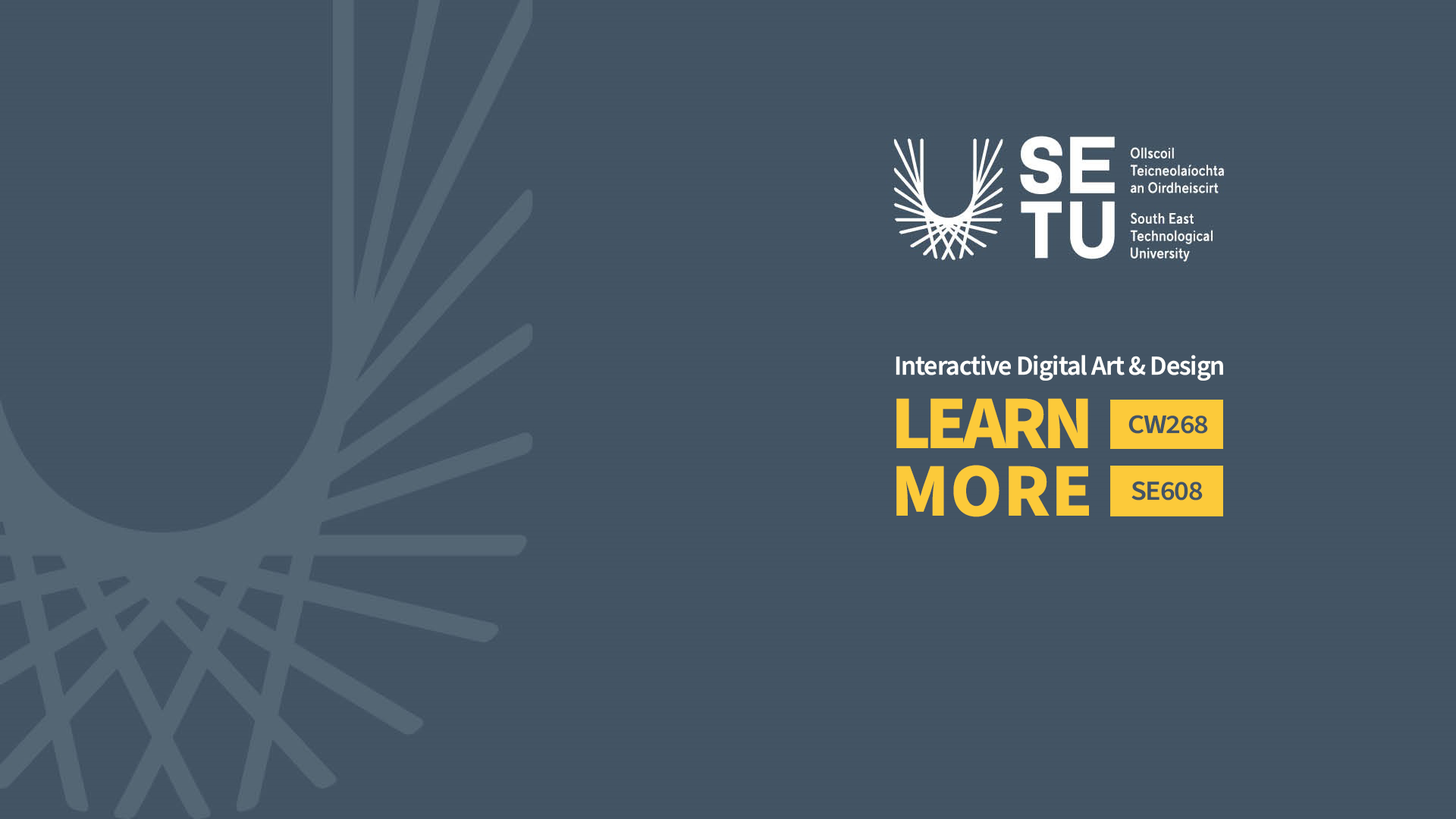
<style>
.page{position:relative;width:1456px;height:819px;background:#435464}
.page>*{position:absolute;margin:0}
.t1{font:27.3px "SourceSans3Roman-Semibold";letter-spacing:-0.03em;color:#fffffd}
.t2{font:75.9px "SourceSans3Roman_800.000wght";letter-spacing:-0.07em;color:#fcca3a}
.t3{font:26.7px "SourceSans3Roman-Semibold";letter-spacing:-0.03em;color:#435465;scale:1.09 1}
.t4{font:75.9px "SourceSans3Roman_800.000wght";letter-spacing:0.01em;color:#fcca3a}
.t5{font:27.5px "SourceSans3Roman-Semibold";letter-spacing:-0.03em;color:#435465;scale:1.06 1}
</style>
<div class="page">
<p class="t1" style="left:896px;top:355px;width:327px;height:26px">Interactive Digital Art &amp; Design</p>
<p class="t2" style="left:896px;top:398px;width:192px;height:50px">LEARN</p>
<p class="t3" style="left:1128px;top:415px;width:80px;height:19px">CW268</p>
<p class="t4" style="left:896px;top:465px;width:193px;height:52px">MORE</p>
<p class="t5" style="left:1131px;top:481px;width:72px;height:19px">SE608</p>
</div>
